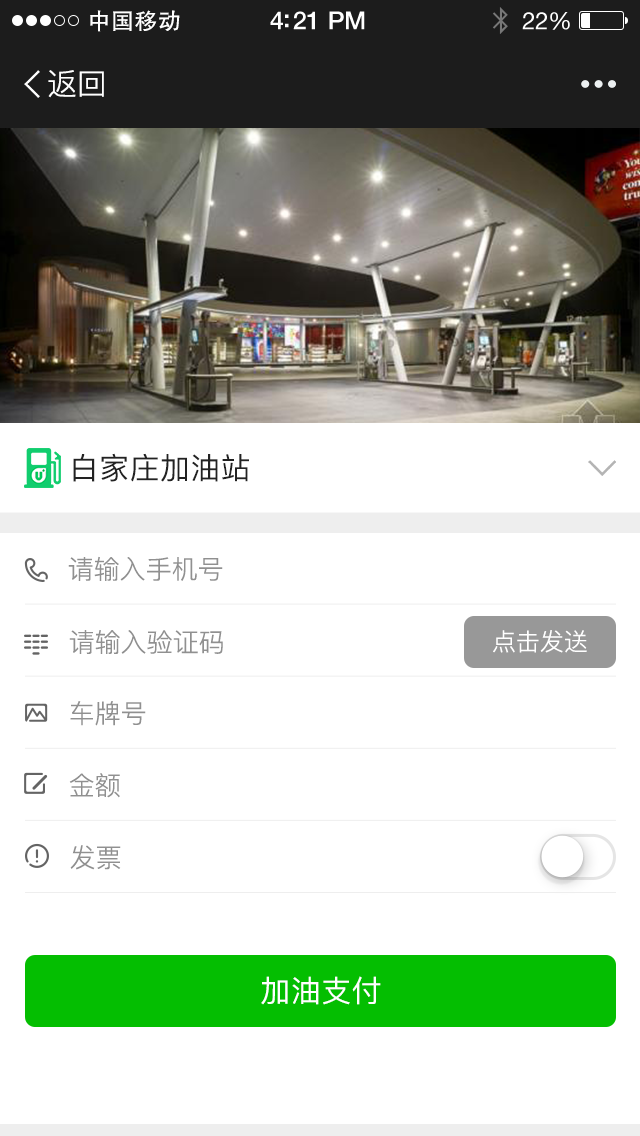
<style>
.page{position:relative;width:640px;height:1136px;background:#ffffff}
.page>*{position:absolute;margin:0}
.t1{font:23px "FZHTK--GBK1-0";letter-spacing:0.02em;color:#ffffff}
.t2{font:25px "HelveticaNeue-Medium";letter-spacing:-0.02em;color:#ffffff}
.t3{font:24px "HelveticaNeue";letter-spacing:-0.02em;color:#ffffff}
.t4{font:30px "PingFang-SC-Regular";color:#ffffff}
.t5{font:30px "PingFang-SC-Medium";letter-spacing:0.02em;color:#222222}
.t6{font:26px "PingFang-SC-Regular";color:#909090}
.t7{font:24px "PingFang-SC-Regular";color:#ffffff}
.t8{font:30px "PingFang-SC-Medium";letter-spacing:0.02em;color:#ffffff}
</style>
<div class="page">
<p class="t1" style="left:90px;top:10px;width:90px;height:22px">中国移动</p>
<p class="t2" style="left:270px;top:11px;width:95px;height:19px">4:21 PM</p>
<p class="t3" style="left:522px;top:12px;width:48px;height:18px">22%</p>
<p class="t4" style="left:48px;top:70px;width:56px;height:28px">返回</p>
<p class="t5" style="left:73px;top:453px;width:176px;height:29px">白家庄加油站</p>
<p class="t6" style="left:68px;top:556px;width:155px;height:25px">请输入手机号</p>
<p class="t6" style="left:69px;top:630px;width:154px;height:24px">请输入验证码</p>
<p class="t7" style="left:493px;top:630px;width:94px;height:23px">点击发送</p>
<p class="t6" style="left:70px;top:701px;width:76px;height:25px">车牌号</p>
<p class="t6" style="left:69px;top:773px;width:51px;height:25px">金额</p>
<p class="t6" style="left:70px;top:845px;width:51px;height:25px">发票</p>
<p class="t8" style="left:261px;top:976px;width:120px;height:29px">加油支付</p>
</div>
